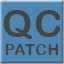
<style>
.page{position:relative;width:64px;height:64px;background:#4e88b0}
.page>*{position:absolute;margin:0}
.t1{font:37.5px "ArialRoundedMTBold";letter-spacing:0.06em;color:#444444}
.t2{font:15.5px "ArialRoundedMTBold";letter-spacing:0.06em;color:#444444}
</style>
<div class="page">
<p class="t1" style="left:3px;top:10px;width:58px;height:29px">QC</p>
<p class="t2" style="left:5px;top:44px;width:54px;height:11px">PATCH</p>
</div>
